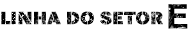
<style>
.page{position:relative;width:192px;height:32px;background:#ffffff}
.page>*{position:absolute;margin:0}
.t1{font:17.5px "PaulGroteskStencil-Black";letter-spacing:0.005em;text-transform:uppercase;font-weight:bold;scale:1.07 1}
</style>
<div class="page">
<p class="t1" style="left:1px;top:11px;width:162px;height:14px">LINHA do SETOR</p>
</div>
